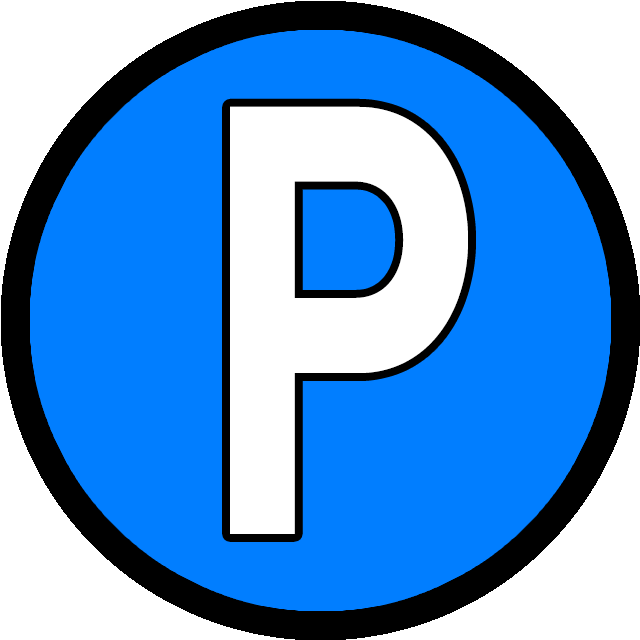
<style>
.page{position:relative;width:640px;height:640px;background:#017eff}
.page>*{position:absolute;margin:0}
.t1{font:600.1px "DINPro-Bold";color:#ffffff;scale:0.78 1}
</style>
<div class="page">
<p class="t1" style="left:230px;top:106px;width:238px;height:428px">P</p>
</div>
